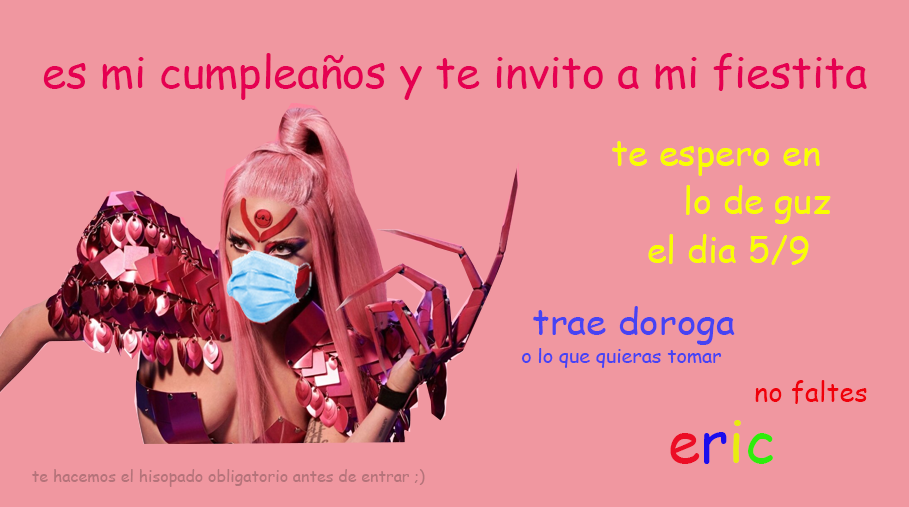
<style>
.page{position:relative;width:909px;height:507px;background:#f097a0}
.page>*{position:absolute;margin:0}
.t1{font:43.6px "ComicSansMS";color:#e50051}
.t2{font:36.1px/48.3px "ComicSansMS";color:#f9ff00}
.t3{font:19px/28.1px "ComicSansMS";color:#4643f3;scale:1.03 1}
.t4{font:35.9px/28.1px "ComicSansMS";color:#4643f3;scale:1.03 1}
.t5{font:27.5px "ComicSansMS";color:#f0000a}
.t6{font:58px "ComicSansMS";color:#ec0d25}
.t7{font:58px "ComicSansMS";color:#1b0dec}
.t8{font:58px "ComicSansMS";color:#e8ec0d}
.t9{font:58px "ComicSansMS";color:#2eec0d}
.t10{font:16px "ComicSansMS";color:#b5737a}
</style>
<div class="page">
<p class="t1" style="left:43px;top:53px;width:824px;height:47px">es mi cumpleaños y te invito a mi fiestita</p>
<p class="t2" style="left:612px;top:141px;width:219px;height:124px;text-align:right">te espero en  <br>lo de guz <br>el dia 5/9</p>
<p class="t3" style="left:521px;top:306px;width:214px;height:62px"><span class="t4"> trae doroga<br></span>o lo que quieras tomar</p>
<p class="t5" style="left:755px;top:380px;width:112px;height:24px">no faltes</p>
<p class="t6" style="left:670px;top:420px;width:103px;height:44px">e<span class="t7">r</span><span class="t8">i</span><span class="t9">c</span></p>
<p class="t10" style="left:32px;top:469px;width:393px;height:18px">te hacemos el hisopado obligatorio antes de entrar ;)</p>
</div>
